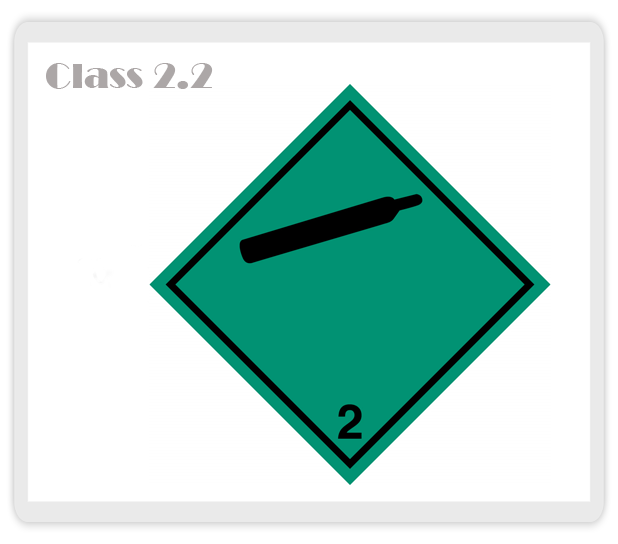
<style>
.page{position:relative;width:618px;height:544px;background:#ffffff}
.page>*{position:absolute;margin:0}
.t1{font:36px "Broadway";color:#aca7a7}
</style>
<div class="page">
<p class="t1" style="left:46px;top:63px;width:167px;height:26px">Class 2.2</p>
</div>
